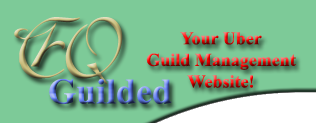
<style>
.page{position:relative;width:316px;height:123px;background:#7dca98}
.page>*{position:absolute;margin:0}
.t1{font:82px "Esperanza"}
.t2{font:18px "TimesNewRomanPS-BoldMT"}
.t3{font:36px "TimesNewRomanPS-BoldMT"}
</style>
<div class="page">
<p class="t1" style="left:14px;top:17px;width:109px;height:68px">EQ</p>
<p class="t2" style="left:146px;top:32px;width:150px;height:56px;text-align:center">Your Uber<br>Guild Management<br>Website!</p>
<p class="t3" style="left:49px;top:79px;width:123px;height:25px">Guilded</p>
</div>
